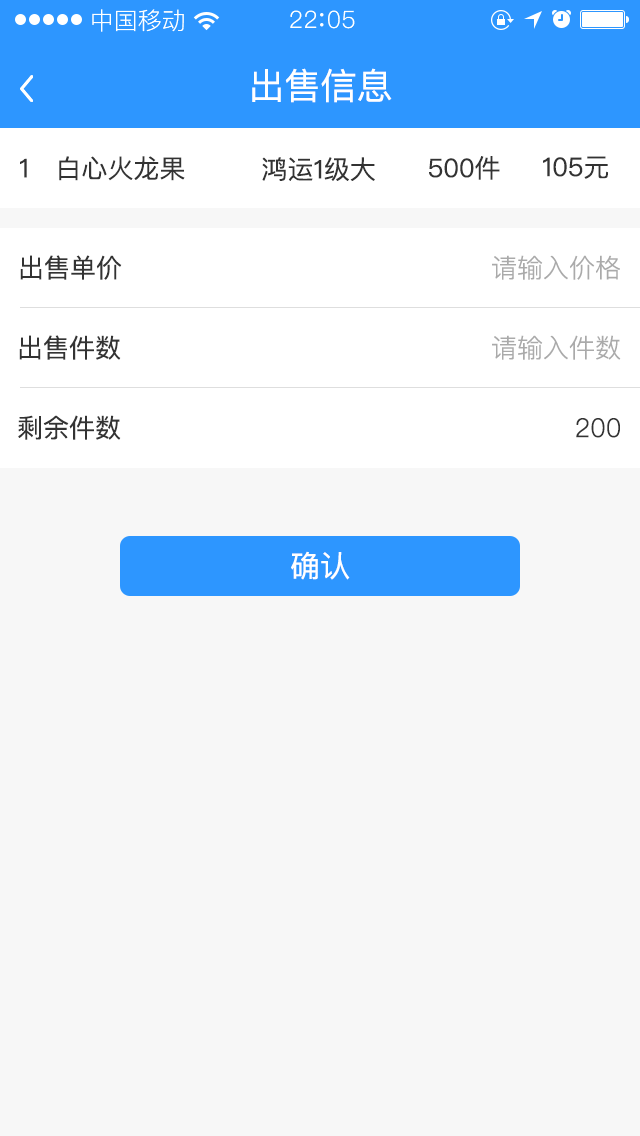
<style>
.page{position:relative;width:640px;height:1136px;background:#f7f7f7}
.page>*{position:absolute;margin:0}
.t1{font:24px "PingFang-SC-Regular";color:#ffffff}
.t2{font:36px "PingFangSC-Regular";color:#ffffff}
.t3{font:25.7px "PingFangSC-Regular";color:#333333}
.t4{font:26px "PingFangSC-Regular";color:#333333}
.t5{font:26px "PingFangSC-Light";color:#aaaaaa}
.t6{font:26px "PingFangSC-Light";color:#333333}
.t7{font:30px "PingFangSC-Regular";color:#ffffff}
</style>
<div class="page">
<p class="t1" style="left:92px;top:9px;width:92px;height:23px">中国移动</p>
<p class="t2" style="left:252px;top:68px;width:140px;height:35px">出售信息</p>
<p class="t3" style="left:20px;top:158px;width:7px;height:20px">1</p>
<p class="t3" style="left:59px;top:156px;width:126px;height:25px">白心火龙果</p>
<p class="t3" style="left:262px;top:157px;width:113px;height:24px">鸿运1级大</p>
<p class="t3" style="left:429px;top:156px;width:71px;height:24px">500件</p>
<p class="t3" style="left:543px;top:156px;width:65px;height:23px">105元</p>
<p class="t4" style="left:20px;top:255px;width:102px;height:25px">出售单价</p>
<p class="t5" style="left:492px;top:255px;width:128px;height:25px">请输入价格</p>
<p class="t4" style="left:19px;top:335px;width:102px;height:25px">出售件数</p>
<p class="t5" style="left:492px;top:335px;width:129px;height:25px">请输入件数</p>
<p class="t4" style="left:18px;top:415px;width:103px;height:25px">剩余件数</p>
<p class="t6" style="left:576px;top:418px;width:44px;height:20px">200</p>
<p class="t7" style="left:291px;top:551px;width:59px;height:29px">确认</p>
</div>
